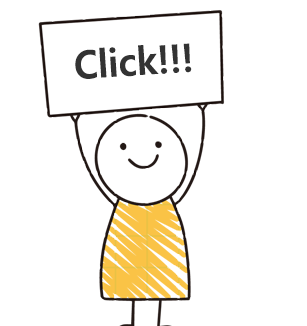
<style>
.page{position:relative;width:307px;height:326px;background:#ffffff}
.page>*{position:absolute;margin:0}
.t1{font:39px "MalgunGothicBold";color:#333333;scale:0.96 1}
</style>
<div class="page">
<p class="t1" style="left:75px;top:43px;width:117px;height:36px;rotate:-4deg">Click!!!</p>
</div>
